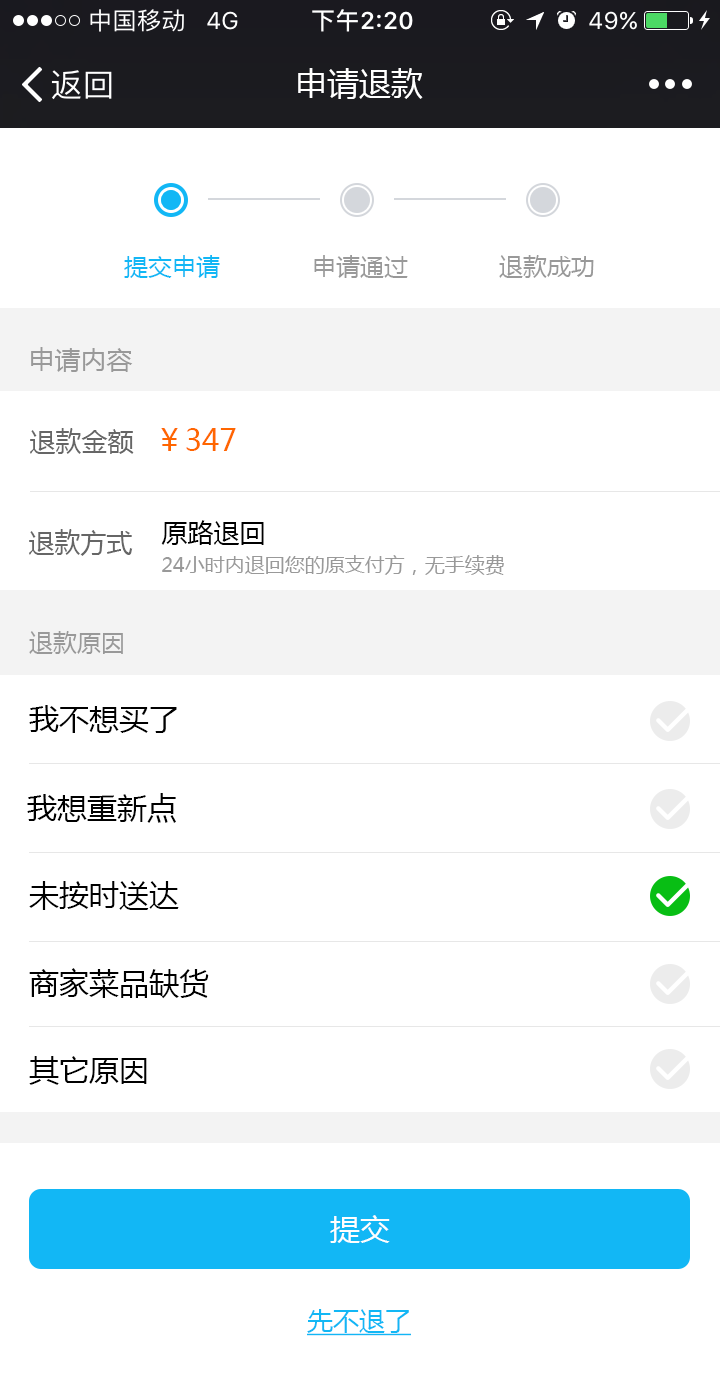
<style>
.page{position:relative;width:720px;height:1373px;background:#ffffff}
.page>*{position:absolute;margin:0}
.t1{font:32px "MicrosoftYaHei";color:#ffffff}
.t2{font:24px "MicrosoftYaHei";color:#12b7f5}
.t3{font:24px "MicrosoftYaHei";color:#999999}
.t4{font:26px "MicrosoftYaHei";color:#999999}
.t5{font:26px "MicrosoftYaHei";color:#666666}
.t6{font:30px "MicrosoftYaHei";color:#ff6600}
.t7{font:26px "MicrosoftYaHei";color:#000000}
.t8{font:20px "MicrosoftYaHei";color:#999999}
.t9{font:30px "MicrosoftYaHei";color:#000000}
.t10{font:30px "MicrosoftYaHei";color:#fefefe}
.t11{font:26px "MicrosoftYaHei";color:#12b7f5;text-decoration:underline}
</style>
<div class="page">
<p class="t1" style="left:298px;top:68px;width:125px;height:31px">申请退款</p>
<p class="t2" style="left:124px;top:255px;width:96px;height:23px">提交申请</p>
<p class="t3" style="left:314px;top:255px;width:94px;height:23px">申请通过</p>
<p class="t3" style="left:499px;top:255px;width:95px;height:23px">退款成功</p>
<p class="t4" style="left:31px;top:347px;width:102px;height:25px">申请内容</p>
<p class="t5" style="left:30px;top:428px;width:104px;height:26px">退款金额</p>
<p class="t6" style="left:161px;top:428px;width:75px;height:23px">￥347</p>
<p class="t7" style="left:161px;top:520px;width:103px;height:25px">原路退回</p>
<p class="t5" style="left:29px;top:529px;width:104px;height:27px">退款方式</p>
<p class="t8" style="left:162px;top:555px;width:342px;height:20px">24小时内退回您的原支付方，无手续费</p>
<p class="t3" style="left:29px;top:631px;width:94px;height:23px">退款原因</p>
<p class="t9" style="left:29px;top:705px;width:148px;height:28px">我不想买了</p>
<p class="t9" style="left:27px;top:793px;width:149px;height:30px">我想重新点</p>
<p class="t9" style="left:29px;top:881px;width:150px;height:29px">未按时送达</p>
<p class="t9" style="left:29px;top:968px;width:180px;height:31px">商家菜品缺货</p>
<p class="t9" style="left:29px;top:1056px;width:118px;height:29px">其它原因</p>
<p class="t10" style="left:330px;top:1215px;width:60px;height:28px">提交</p>
<p class="t11" style="left:307px;top:1309px;width:104px;height:27px">先不退了</p>
</div>
